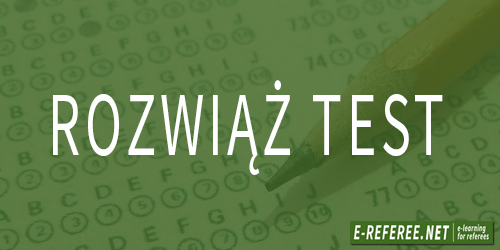
<style>
.page{position:relative;width:500px;height:250px}
.page>*{position:absolute;margin:0}
.t1{font:91px "SourceSansPro-Regular";letter-spacing:0.08em;color:#ffffff;scale:0.62 1}
</style>
<div class="page">
<p class="t1" style="left:53px;top:80px;width:390px;height:95px">ROZWIĄŻ TEST</p>
</div>
